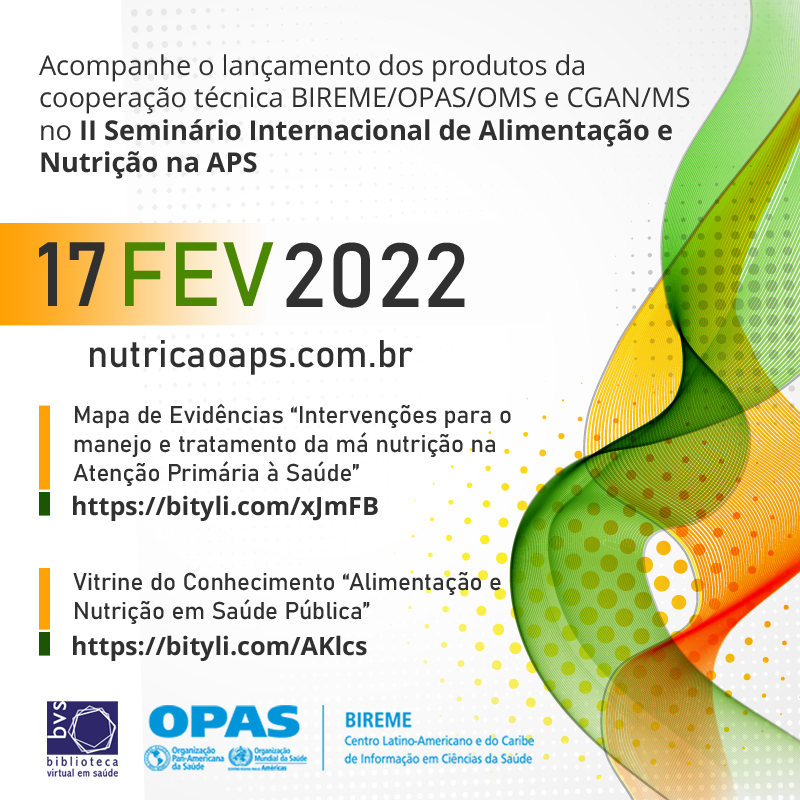
<style>
.page{position:relative;width:800px;height:800px;background:#ffffff}
.page>*{position:absolute;margin:0}
.t1{font:27.1px "OpenSans";color:#303030}
.t2{font:27.1px "OpenSans-Bold";color:#303030}
.t3{font:89.8px "Bahnschrift";color:#303030}
.t4{font:89.8px "Bahnschrift";color:#4c8702}
.t5{font:38px "Bahnschrift";color:#303030}
.t6{font:24px "Bahnschrift";color:#303030}
.t7{font:25.1px "OpenSans-Bold";color:#303030}
</style>
<div class="page">
<p class="t1" style="left:39px;top:54px;width:651px;height:125px">Acompanhe o lançamento dos produtos da cooperação técnica BIREME/OPAS/OMS e CGAN/MS no <span class="t2">II Seminário Internacional de Alimentação e Nutrição na APS</span></p>
<p class="t3" style="left:39px;top:242px;width:66px;height:64px">17</p>
<p class="t4" style="left:125px;top:242px;width:149px;height:64px">FEV</p>
<p class="t3" style="left:285px;top:242px;width:180px;height:66px">2022</p>
<p class="t5" style="left:90px;top:340px;width:323px;height:35px">nutricaoaps.com.br</p>
<p class="t6" style="left:73px;top:403px;width:438px;height:83px">Mapa de Evidências “Intervenções para o manejo e tratamento da má nutrição na Atenção Primária à Saúde”</p>
<p class="t7" style="left:73px;top:495px;width:305px;height:26px">https://bityli.com/xJmFB</p>
<p class="t6" style="left:73px;top:572px;width:428px;height:52px">Vitrine do Conhecimento “Alimentação e Nutrição em Saúde Pública”</p>
<p class="t7" style="left:73px;top:635px;width:294px;height:26px">https://bityli.com/AKlcs</p>
</div>
